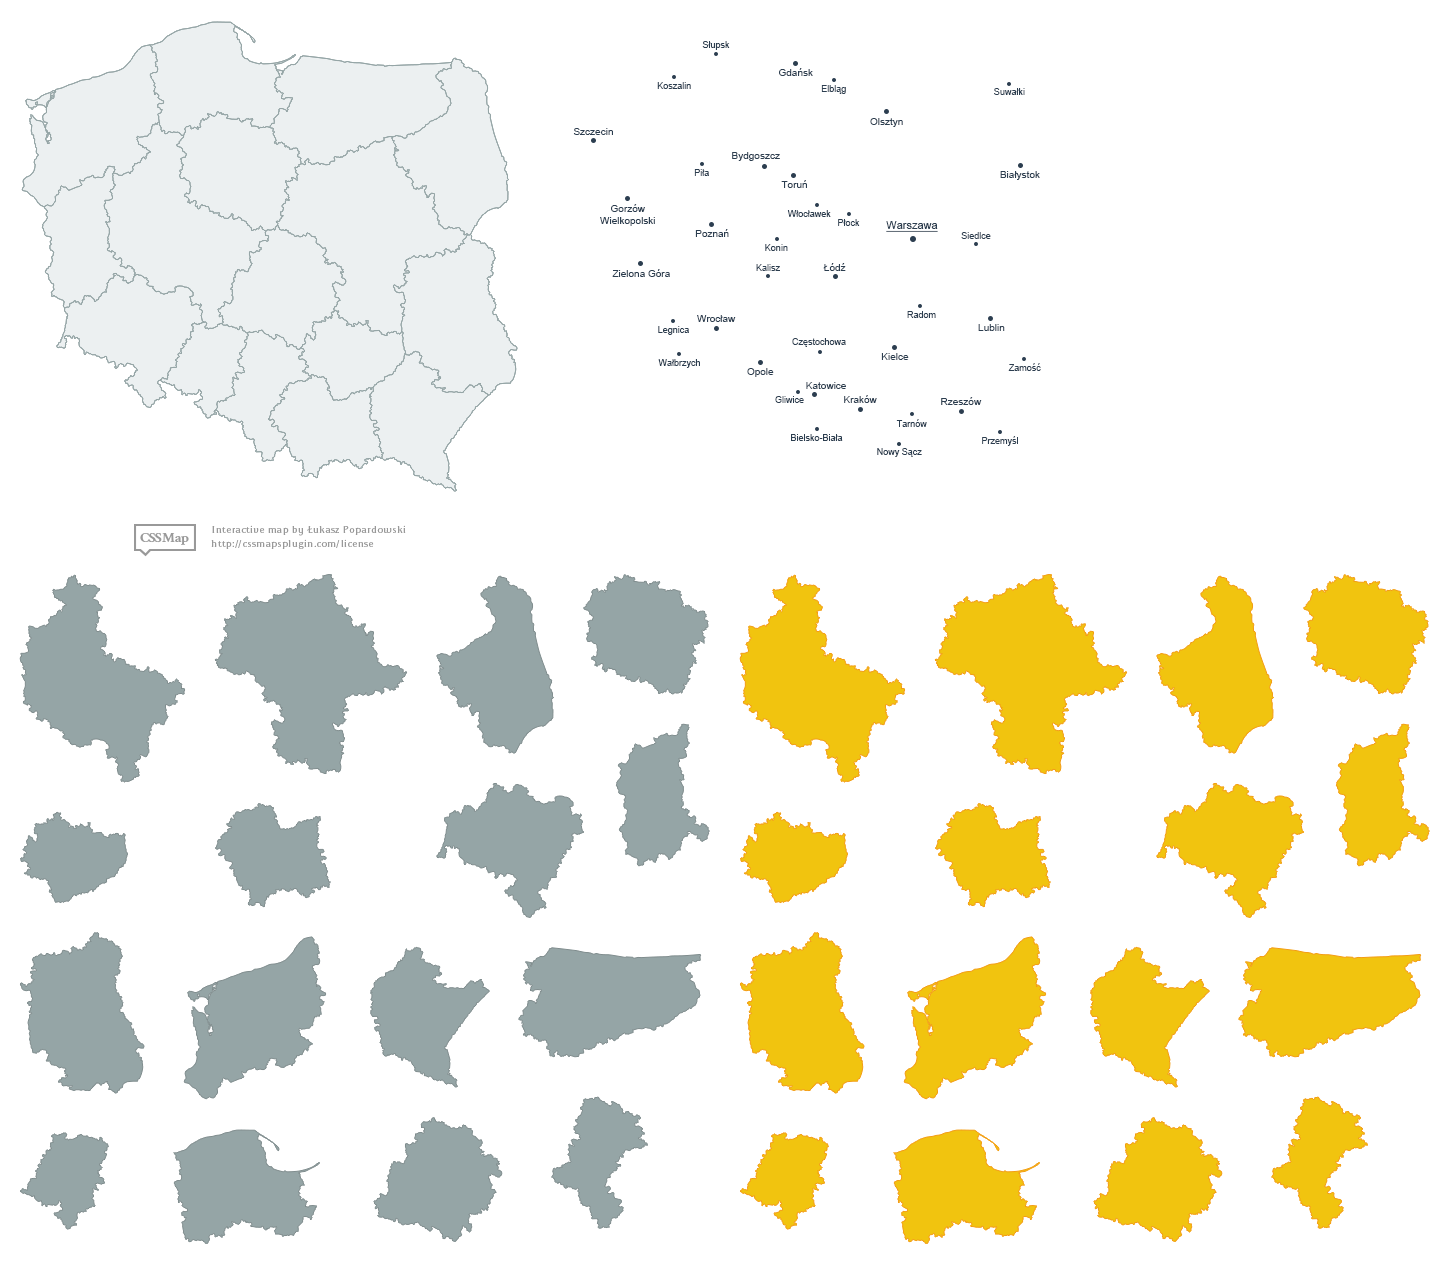
<style>
.page{position:relative;width:1450px;height:1262px;background:#ffffff}
.page>*{position:absolute;margin:0}
.t1{font:9px "ArialMT";color:#2c3e50}
.t2{font:10px "ArialMT";color:#2c3e50}
.t3{font:11px "ArialMT";color:#2c3e50;text-decoration:underline}
</style>
<div class="page">
<p class="t1" style="left:702px;top:41px;width:28px;height:9px">Słupsk</p>
<p class="t2" style="left:779px;top:68px;width:34px;height:8px">Gdańsk</p>
<p class="t1" style="left:657px;top:82px;width:34px;height:7px">Koszalin</p>
<p class="t1" style="left:821px;top:85px;width:25px;height:9px">Elbląg</p>
<p class="t1" style="left:994px;top:88px;width:31px;height:7px">Suwałki</p>
<p class="t2" style="left:870px;top:118px;width:33px;height:9px">Olsztyn</p>
<p class="t2" style="left:573px;top:128px;width:40px;height:7px">Szczecin</p>
<p class="t2" style="left:732px;top:152px;width:48px;height:9px">Bydgoszcz</p>
<p class="t1" style="left:694px;top:169px;width:15px;height:7px">Piła</p>
<p class="t2" style="left:1000px;top:171px;width:40px;height:9px">Białystok</p>
<p class="t2" style="left:781px;top:180px;width:26px;height:8px">Toruń</p>
<p class="t2" style="left:600px;top:204px;width:55px;height:22px;text-align:center">Gorzów<br>Wielkopolski</p>
<p class="t1" style="left:787px;top:210px;width:44px;height:7px">Włocławek</p>
<p class="t1" style="left:838px;top:219px;width:22px;height:7px">Płock</p>
<p class="t3" style="left:886px;top:221px;width:52px;height:11px">Warszawa</p>
<p class="t2" style="left:695px;top:229px;width:34px;height:8px">Poznań</p>
<p class="t1" style="left:961px;top:232px;width:30px;height:7px">Siedlce</p>
<p class="t1" style="left:765px;top:244px;width:23px;height:7px">Konin</p>
<p class="t2" style="left:612px;top:269px;width:58px;height:8px">Zielona Góra</p>
<p class="t1" style="left:756px;top:264px;width:24px;height:7px">Kalisz</p>
<p class="t2" style="left:823px;top:263px;width:23px;height:8px">Łódź</p>
<p class="t2" style="left:697px;top:315px;width:39px;height:7px">Wrocław</p>
<p class="t1" style="left:907px;top:311px;width:29px;height:7px">Radom</p>
<p class="t1" style="left:658px;top:326px;width:31px;height:9px">Legnica</p>
<p class="t2" style="left:978px;top:324px;width:27px;height:7px">Lublin</p>
<p class="t1" style="left:792px;top:338px;width:54px;height:9px">Częstochowa</p>
<p class="t2" style="left:881px;top:353px;width:28px;height:7px">Kielce</p>
<p class="t1" style="left:658px;top:359px;width:42px;height:9px">Wałbrzych</p>
<p class="t1" style="left:1008px;top:363px;width:33px;height:8px">Zamość</p>
<p class="t2" style="left:747px;top:368px;width:27px;height:9px">Opole</p>
<p class="t2" style="left:806px;top:382px;width:40px;height:7px">Katowice</p>
<p class="t1" style="left:775px;top:396px;width:29px;height:7px">Gliwice</p>
<p class="t2" style="left:844px;top:395px;width:33px;height:8px">Kraków</p>
<p class="t2" style="left:941px;top:397px;width:41px;height:8px">Rzeszów</p>
<p class="t1" style="left:896px;top:419px;width:31px;height:8px">Tarnów</p>
<p class="t1" style="left:791px;top:434px;width:52px;height:7px">Bielsko-Biała</p>
<p class="t1" style="left:982px;top:436px;width:36px;height:10px">Przemyśl</p>
<p class="t1" style="left:877px;top:448px;width:45px;height:9px">Nowy Sącz</p>
</div>
